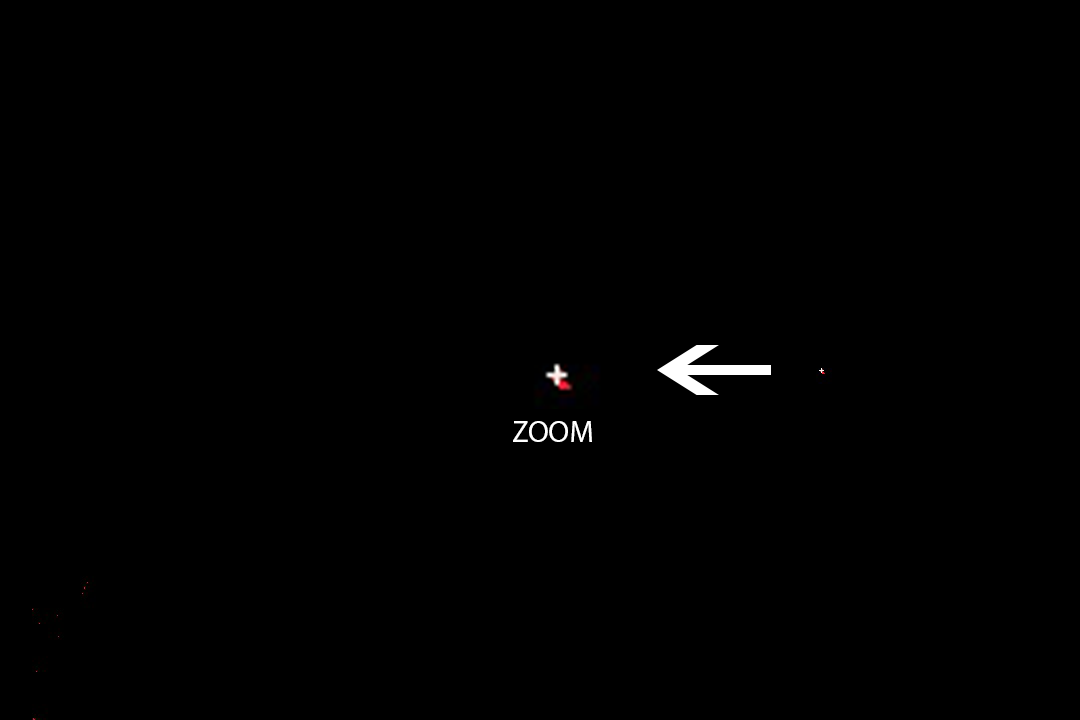
<style>
.page{position:relative;width:1080px;height:720px;background:#000000}
.page>*{position:absolute;margin:0}
.t1{font:30px "MyriadPro-Regular";color:#ffffff}
</style>
<div class="page">
<p class="t1" style="left:513px;top:421px;width:79px;height:21px">ZOOM</p>
</div>
